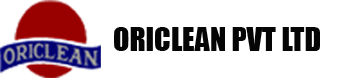
<style>
.page{position:relative;width:340px;height:78px;background:#ffffff}
.page>*{position:absolute;margin:0}
.t1{font:30px "Impact";color:#050505}
</style>
<div class="page">
<p class="t1" style="left:114px;top:27px;width:206px;height:24px">ORICLEAN PVT LTD</p>
</div>
